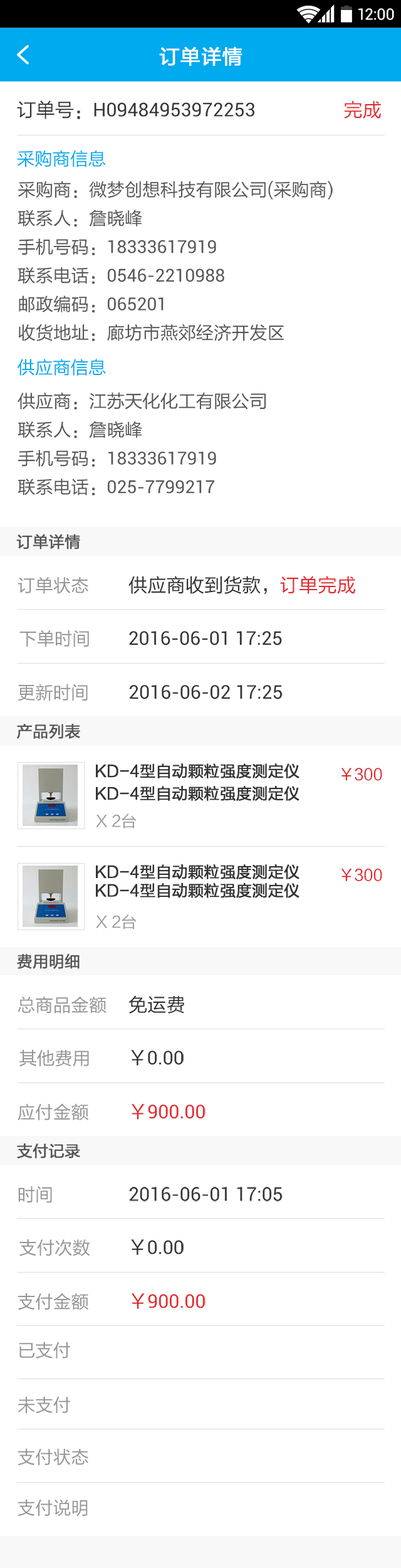
<style>
.page{position:relative;width:401px;height:1568px;background:#ffffff}
.page>*{position:absolute;margin:0}
.t1{font:15.6px "Roboto-Regular";color:#ffffff}
.t2{font:20.1px "FZLTHJW--GB1-0";letter-spacing:0.02em;color:#ffffff;font-weight:bold}
.t3{font:19px "Roboto-Regular";color:#333333}
.t4{font:19px "FZLTHJW--GB1-0";color:#333333}
.t5{font:19px "FZLTHJW--GB1-0";color:#e1292e}
.t6{font:17.8px "FZLTHJW--GB1-0";color:#00aaee}
.t7{font:17.8px/28.6px "FZLTHJW--GB1-0";color:#555555}
.t8{font:17.8px/28.6px "Roboto-Regular";color:#555555}
.t9{font:15.6px "FZLTHJW--GB1-0";color:#555555;font-weight:bold}
.t10{font:17.8px "FZLTHJW--GB1-0";color:#969696}
.t11{font:15.6px/22.3px "FZLTHJW--GB1-0";color:#333333;font-weight:bold}
.t12{font:15.6px "FZLTHJW--GB1-0";color:#e1292e}
.t13{font:15.6px "FZLTHJW--GB1-0";color:#9b9b9b}
.t14{font:15.6px "FZLTHJW--GB1-0";color:#333333;font-weight:bold}
.t15{font:19px "Roboto-Regular";color:#e1292e}
</style>
<div class="page">
<p class="t1" style="left:359px;top:8px;width:36px;height:12px">12:00</p>
<p class="t2" style="left:159px;top:46px;width:84px;height:20px">订单详情</p>
<p class="t3" style="left:17px;top:100px;width:238px;height:19px"><span class="t4">订单号：</span>H09484953972253</p>
<p class="t5" style="left:344px;top:100px;width:37px;height:19px">完成</p>
<p class="t6" style="left:17px;top:150px;width:89px;height:17px">采购商信息</p>
<p class="t7" style="left:18px;top:181px;width:315px;height:160px">采购商：微梦创想科技有限公司(采购商)<br>联系人：詹晓峰<br>手机号码：<span class="t8">18333617919<br></span>联系电话：<span class="t8">0546-2210988<br></span>邮政编码：<span class="t8">065201<br></span>收货地址：廊坊市燕郊经济开发区</p>
<p class="t6" style="left:18px;top:359px;width:88px;height:17px">供应商信息</p>
<p class="t7" style="left:18px;top:392px;width:249px;height:103px">供应商：江苏天化化工有限公司<br>联系人：詹晓峰<br>手机号码：<span class="t8">18333617919<br></span>联系电话：<span class="t8">025-7799217</span></p>
<p class="t9" style="left:16px;top:534px;width:64px;height:15px">订单详情</p>
<p class="t10" style="left:18px;top:577px;width:70px;height:17px">订单状态</p>
<p class="t4" style="left:129px;top:576px;width:227px;height:19px">供应商收到货款，<span class="t5">订单完成</span></p>
<p class="t10" style="left:19px;top:630px;width:70px;height:17px">下单时间</p>
<p class="t3" style="left:129px;top:631px;width:153px;height:14px">2016-06-01 17:25</p>
<p class="t10" style="left:18px;top:684px;width:70px;height:17px">更新时间</p>
<p class="t3" style="left:129px;top:685px;width:154px;height:14px">2016-06-02 17:25</p>
<p class="t9" style="left:17px;top:724px;width:63px;height:15px">产品列表</p>
<p class="t11" style="left:96px;top:763px;width:204px;height:38px">KD-4型自动颗粒强度测定仪<br>KD-4型自动颗粒强度测定仪</p>
<p class="t12" style="left:341px;top:768px;width:42px;height:13px">￥300</p>
<p class="t13" style="left:96px;top:813px;width:41px;height:16px">X 2台</p>
<p class="t14" style="left:96px;top:864px;width:204px;height:34px">KD-4型自动颗粒强度测定仪<br>KD-4型自动颗粒强度测定仪</p>
<p class="t12" style="left:341px;top:868px;width:42px;height:13px">￥300</p>
<p class="t13" style="left:96px;top:914px;width:41px;height:16px">X 2台</p>
<p class="t9" style="left:17px;top:953px;width:63px;height:16px">费用明细</p>
<p class="t10" style="left:18px;top:997px;width:89px;height:17px">总商品金额</p>
<p class="t4" style="left:129px;top:995px;width:55px;height:19px">免运费</p>
<p class="t10" style="left:19px;top:1049px;width:70px;height:18px">其他费用</p>
<p class="t3" style="left:131px;top:1050px;width:53px;height:16px"><span class="t4">￥</span>0.00</p>
<p class="t10" style="left:18px;top:1103px;width:71px;height:18px">应付金额</p>
<p class="t15" style="left:131px;top:1104px;width:75px;height:16px"><span class="t5">￥</span>900.00</p>
<p class="t9" style="left:17px;top:1143px;width:63px;height:15px">支付记录</p>
<p class="t10" style="left:18px;top:1186px;width:34px;height:17px">时间</p>
<p class="t3" style="left:129px;top:1187px;width:154px;height:15px">2016-06-01 17:05</p>
<p class="t10" style="left:19px;top:1239px;width:71px;height:17px">支付次数</p>
<p class="t3" style="left:131px;top:1239px;width:53px;height:16px"><span class="t4">￥</span>0.00</p>
<p class="t10" style="left:18px;top:1293px;width:71px;height:17px">支付金额</p>
<p class="t15" style="left:131px;top:1293px;width:75px;height:16px"><span class="t5">￥</span>900.00</p>
<p class="t10" style="left:19px;top:1342px;width:51px;height:17px">已支付</p>
<p class="t10" style="left:18px;top:1396px;width:52px;height:18px">未支付</p>
<p class="t10" style="left:18px;top:1448px;width:70px;height:18px">支付状态</p>
<p class="t10" style="left:18px;top:1499px;width:70px;height:18px">支付说明</p>
</div>
